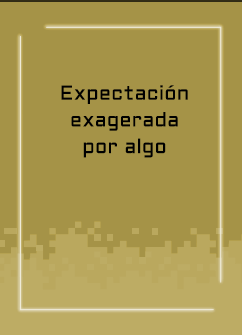
<style>
.page{position:relative;width:242px;height:335px;background:#a59347}
.page>*{position:absolute;margin:0}
.t1{font:20px/26.7px "Aldrich-Regular";letter-spacing:0.015em;color:#000000}
</style>
<div class="page">
<p class="t1" style="left:61px;top:85px;width:127px;height:73px;text-align:center">Expectación<br>exagerada<br>por algo</p>
</div>
